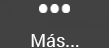
<style>
.page{position:relative;width:109px;height:48px;background:#424242}
.page>*{position:absolute;margin:0}
.t1{font:18px "Roboto-Regular";color:#ffffff}
</style>
<div class="page">
<p class="t1" style="left:31px;top:34px;width:48px;height:13px">Más...</p>
</div>
